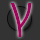
<style>
.page{position:relative;width:40px;height:40px;background:#333333}
.page>*{position:absolute;margin:0}
.t1{font:54px "Calibri-Light";letter-spacing:-0.02em;color:#a2025b}
</style>
<div class="page">
<p class="t1" style="left:11px;top:3px;width:21px;height:34px">γ</p>
</div>
